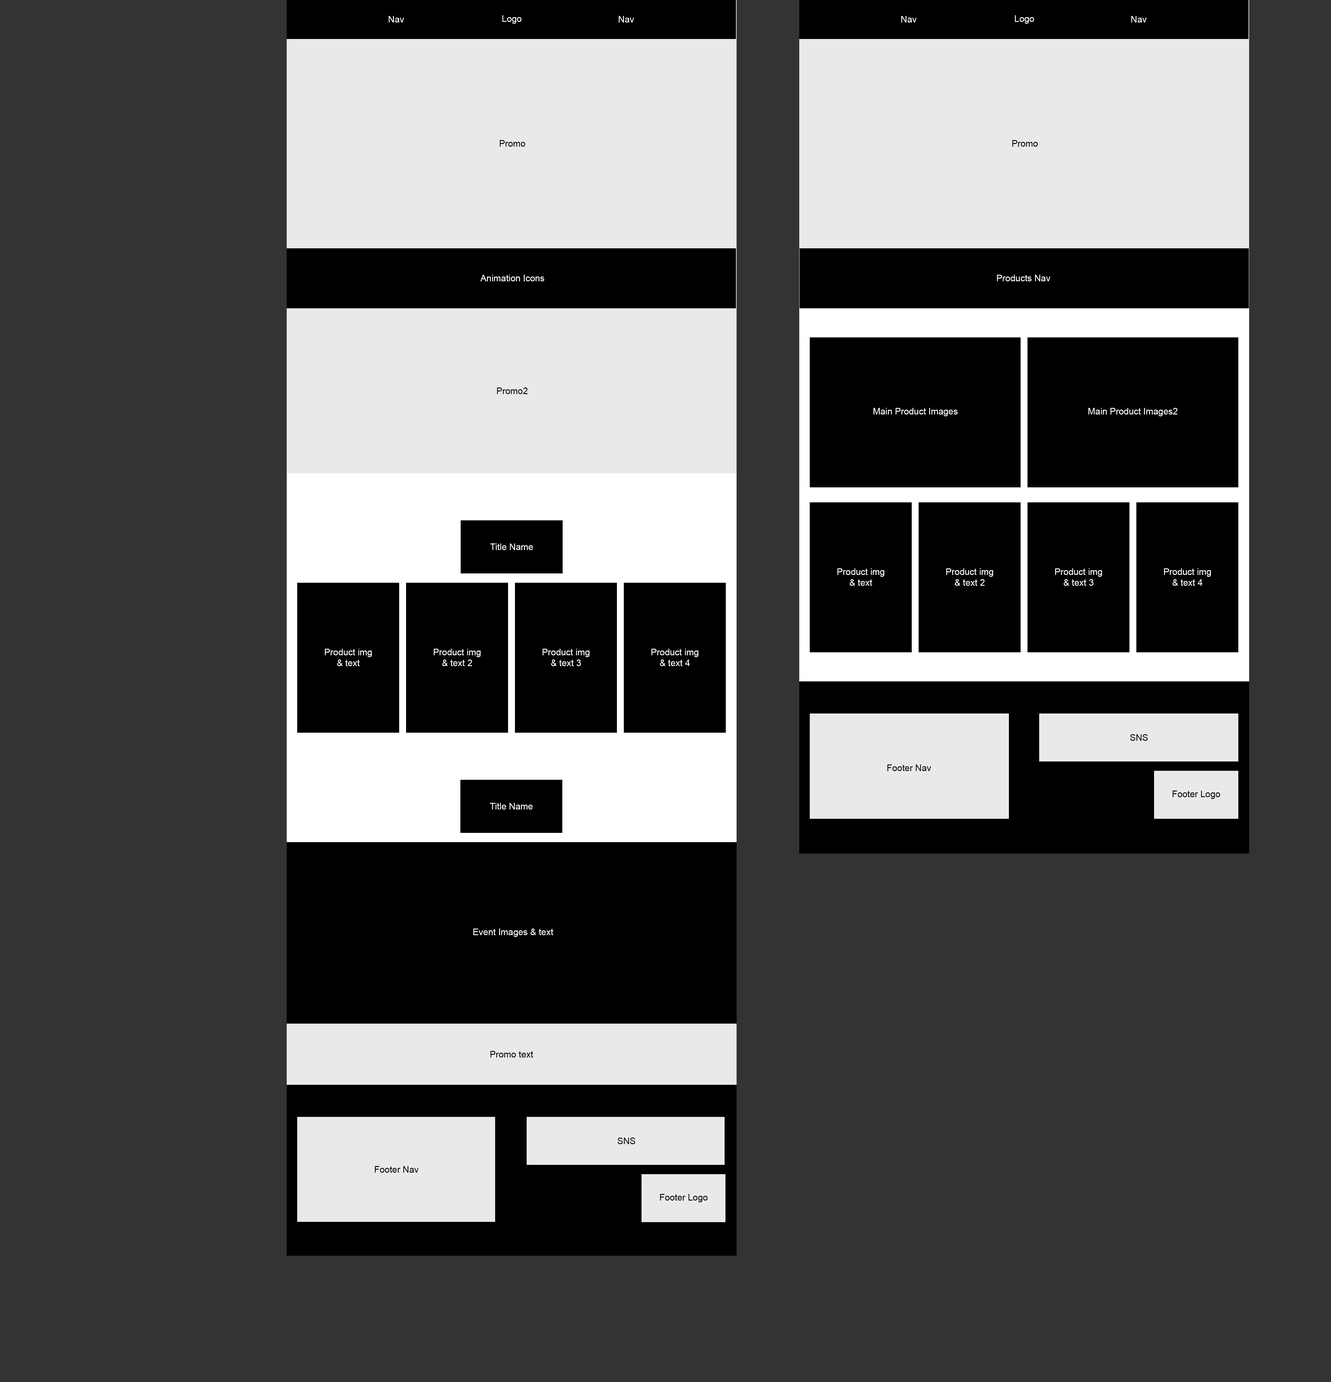
<style>
.page{position:relative;width:1331px;height:1382px;background:#333333}
.page>*{position:absolute;margin:0}
.t1{font:9px "ArialMT";color:#ffffff}
.t2{font:9px "ArialMT";color:#000000}
</style>
<div class="page">
<p class="t1" style="left:389px;top:16px;width:15px;height:6px">Nav</p>
<p class="t1" style="left:502px;top:15px;width:20px;height:9px">Logo</p>
<p class="t1" style="left:619px;top:16px;width:15px;height:6px">Nav</p>
<p class="t1" style="left:901px;top:16px;width:16px;height:6px">Nav</p>
<p class="t1" style="left:1015px;top:15px;width:19px;height:9px">Logo</p>
<p class="t1" style="left:1132px;top:16px;width:15px;height:6px">Nav</p>
<p class="t2" style="left:500px;top:140px;width:26px;height:7px">Promo</p>
<p class="t2" style="left:1012px;top:140px;width:26px;height:7px">Promo</p>
<p class="t1" style="left:480px;top:275px;width:64px;height:6px">Animation Icons</p>
<p class="t1" style="left:997px;top:275px;width:54px;height:6px">Products Nav</p>
<p class="t2" style="left:497px;top:388px;width:31px;height:6px">Promo2</p>
<p class="t1" style="left:874px;top:408px;width:84px;height:8px">Main Product Images</p>
<p class="t1" style="left:1089px;top:408px;width:89px;height:8px">Main Product Images2</p>
<p class="t1" style="left:490px;top:544px;width:43px;height:6px">Title Name</p>
<p class="t1" style="left:838px;top:568px;width:47px;height:18px;text-align:center">Product img<br>&amp; text</p>
<p class="t1" style="left:946px;top:568px;width:48px;height:18px;text-align:center">Product img<br>&amp; text 2</p>
<p class="t1" style="left:1055px;top:568px;width:47px;height:18px;text-align:center">Product img<br>&amp; text 3</p>
<p class="t1" style="left:1164px;top:568px;width:47px;height:18px;text-align:center">Product img<br>&amp; text 4</p>
<p class="t1" style="left:325px;top:649px;width:47px;height:17px;text-align:center">Product img<br>&amp; text</p>
<p class="t1" style="left:434px;top:649px;width:47px;height:17px;text-align:center">Product img<br>&amp; text 2</p>
<p class="t1" style="left:543px;top:649px;width:47px;height:17px;text-align:center">Product img<br>&amp; text 3</p>
<p class="t1" style="left:652px;top:649px;width:47px;height:17px;text-align:center">Product img<br>&amp; text 4</p>
<p class="t2" style="left:1130px;top:734px;width:18px;height:7px">SNS</p>
<p class="t2" style="left:888px;top:765px;width:43px;height:6px">Footer Nav</p>
<p class="t2" style="left:1173px;top:791px;width:48px;height:8px">Footer Logo</p>
<p class="t1" style="left:490px;top:803px;width:43px;height:7px">Title Name</p>
<p class="t1" style="left:473px;top:929px;width:80px;height:8px">Event Images &amp; text</p>
<p class="t2" style="left:490px;top:1051px;width:43px;height:7px">Promo text</p>
<p class="t2" style="left:618px;top:1138px;width:17px;height:6px">SNS</p>
<p class="t2" style="left:375px;top:1166px;width:44px;height:7px">Footer Nav</p>
<p class="t2" style="left:660px;top:1194px;width:48px;height:9px">Footer Logo</p>
</div>
